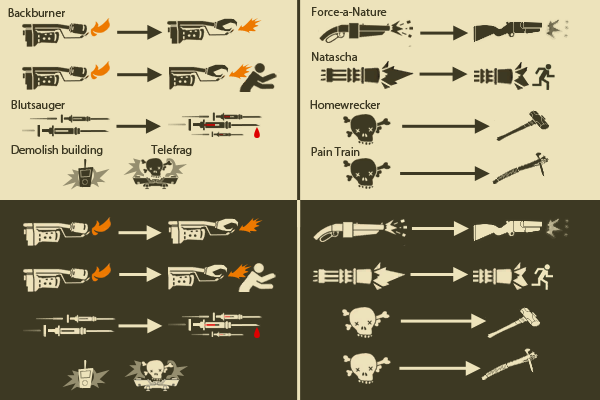
<style>
.page{position:relative;width:600px;height:400px;background:#3d3923}
.page>*{position:absolute;margin:0}
.t1{font:12px "MyriadPro-Regular";color:#3d3923}
</style>
<div class="page">
<p class="t1" style="left:8px;top:8px;width:57px;height:9px">Backburner</p>
<p class="t1" style="left:312px;top:7px;width:75px;height:9px">Force-a-Nature</p>
<p class="t1" style="left:312px;top:52px;width:45px;height:9px">Natascha</p>
<p class="t1" style="left:11px;top:100px;width:54px;height:11px">Blutsauger</p>
<p class="t1" style="left:310px;top:100px;width:70px;height:9px">Homewrecker</p>
<p class="t1" style="left:11px;top:145px;width:92px;height:11px">Demolish building</p>
<p class="t1" style="left:151px;top:145px;width:41px;height:11px">Telefrag</p>
<p class="t1" style="left:311px;top:147px;width:49px;height:9px">Pain Train</p>
</div>
